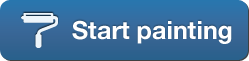
<style>
.page{position:relative;width:249px;height:61px}
.page>*{position:absolute;margin:0}
.t1{font:25px "HelveticaNeue-Bold";color:#ffffff}
</style>
<div class="page">
<p class="t1" style="left:72px;top:20px;width:160px;height:24px">Start painting</p>
</div>
